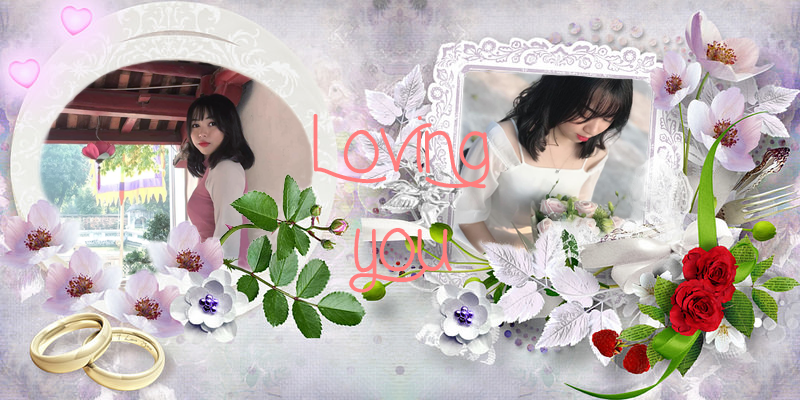
<style>
.page{position:relative;width:800px;height:400px}
.page>*{position:absolute;margin:0}
.t1{font:82px "ForgetMeNot";color:#ff7e7e}
</style>
<div class="page">
<p class="t1" style="left:313px;top:114px;width:177px;height:179px;text-align:center">Loving<br>you</p>
</div>
